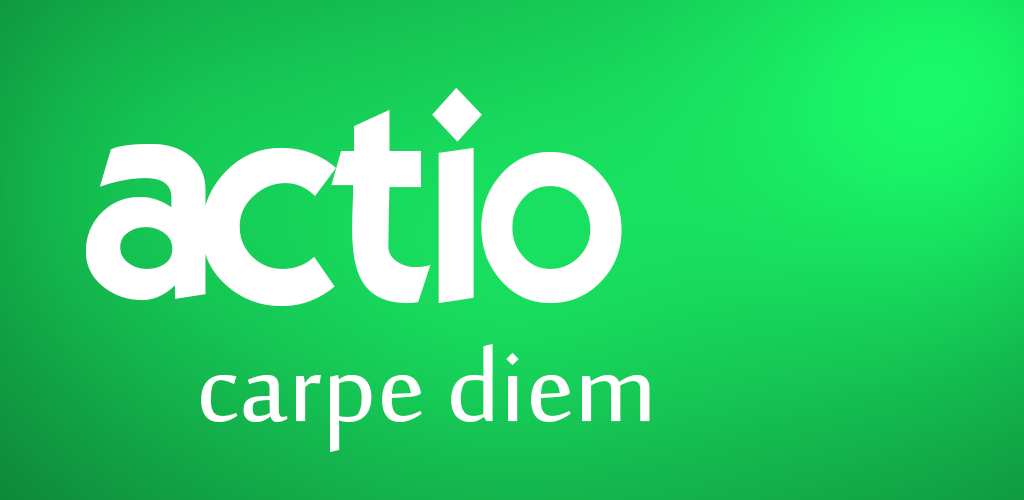
<style>
.page{position:relative;width:1024px;height:500px}
.page>*{position:absolute;margin:0}
.t1{font:275px "ELEGANCE";color:#ffffff}
.t2{font:136px "SakkalMajalla";color:#ffffff}
</style>
<div class="page">
<p class="t1" style="left:86px;top:88px;width:536px;height:218px">actio</p>
<p class="t2" style="left:201px;top:344px;width:449px;height:108px">carpe diem</p>
</div>
